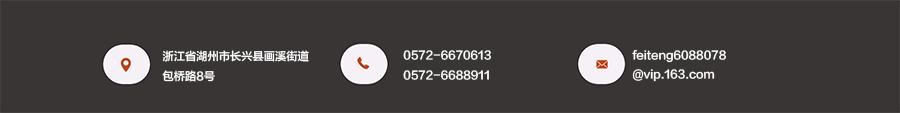
<style>
.page{position:relative;width:900px;height:113px;background:#393535}
.page>*{position:absolute;margin:0}
.t1{font:11.3px "FZLTZHK--GBK1-0";color:#ffffff}
</style>
<div class="page">
<p class="t1" style="left:162px;top:50px;width:147px;height:32px">浙江省湖州市长兴县画溪街道<br>包桥路8号</p>
<p class="t1" style="left:403px;top:50px;width:88px;height:30px">0572-6670613<br>0572-6688911</p>
<p class="t1" style="left:632px;top:49px;width:94px;height:33px">feiteng6088078<br>@vip.163.com</p>
</div>
